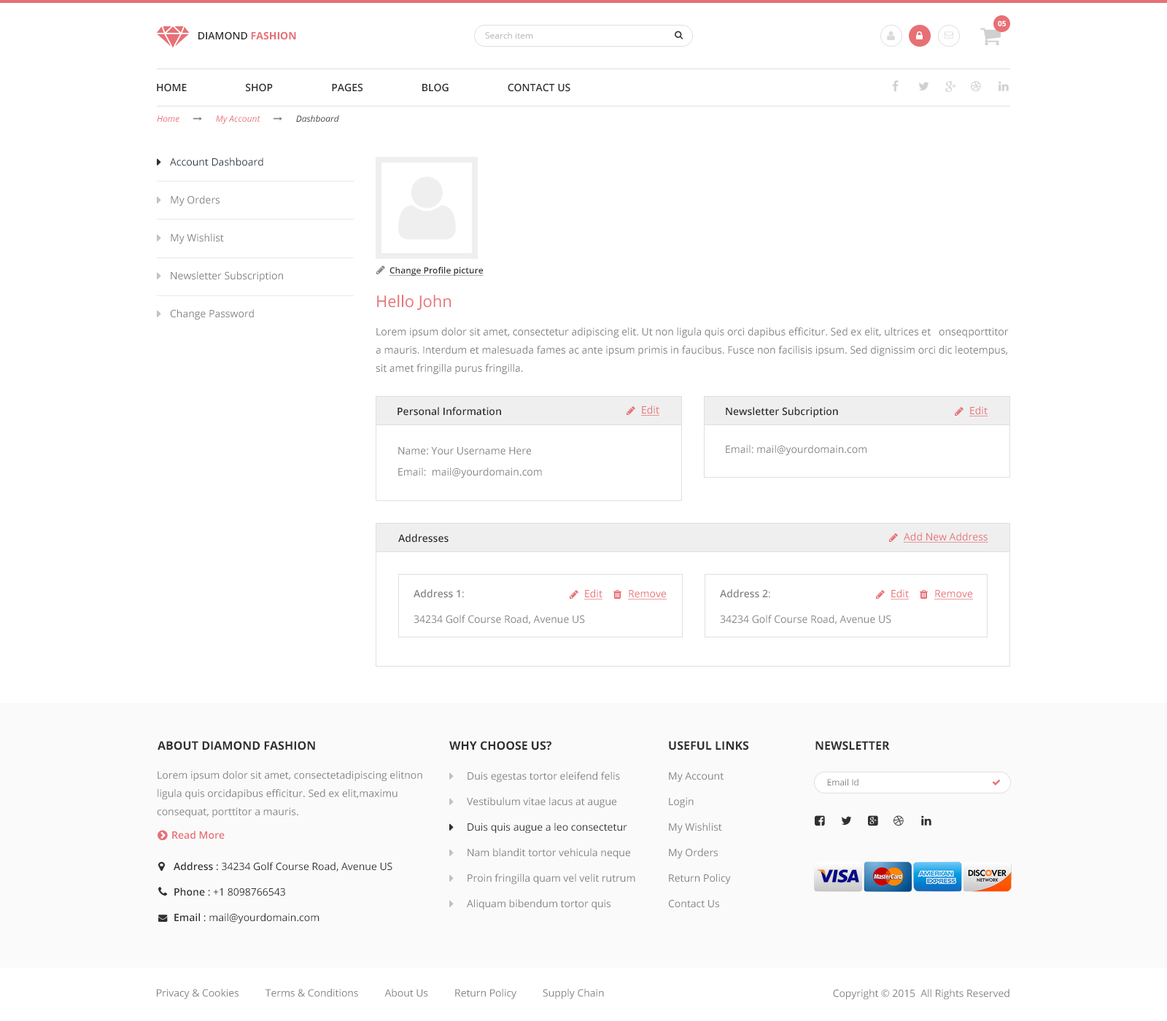
<style>
.page{position:relative;width:1167px;height:1021px;background:#ffffff}
.page>*{position:absolute;margin:0}
.t1{font:7.3px "OpenSans-Bold";color:#ffffff}
.t2{font:10.2px "OpenSans-Semibold";color:#2f2f2f;text-transform:uppercase}
.t3{font:10.2px "OpenSans-Bold";color:#e77075;text-transform:uppercase}
.t4{font:8.8px "OpenSans";color:#c2c2c2}
.t5{font:10.2px/37.9px "OpenSans";color:#848484}
.t6{font:10.2px/37.9px "OpenSans";color:#26394b}
.t7{font:8.8px "OpenSans-Semibold";color:#2f2f2f;text-decoration:underline}
.t8{font:16.1px "OpenSans";color:#e77075}
.t9{font:10.2px/18.2px "OpenSans";color:#848484}
.t10{font:10.2px "OpenSans-Semibold";color:#2f2f2f}
.t11{font:10.2px "OpenSans";color:#e77075;text-decoration:underline}
.t12{font:10.2px/21.2px "OpenSans";color:#848484}
.t13{font:10.2px "OpenSans";color:#848484}
.t14{font:10.2px/25.5px "OpenSans";color:#848484}
.t15{font:10.2px/21.9px "OpenSans-Semibold";color:#848484}
.t16{font:10.2px/21.9px "OpenSans";color:#848484}
.t17{font:11.7px "OpenSans-Bold";color:#2f2f2f;text-transform:uppercase}
.t18{font:10.2px/25.5px "OpenSans";color:#2f2f2f}
.t19{font:8.8px "OpenSans";color:#887f80}
.t20{font:10.2px "OpenSans-Semibold";color:#e77075}
.t21{font:10.2px/25.5px "OpenSans-Semibold";color:#2f2f2f}
</style>
<div class="page">
<p class="t1" style="left:998px;top:20px;width:8px;height:6px">05</p>
<p class="t2" style="left:198px;top:31px;width:98px;height:9px">Diamond <span class="t3">fashion</span></p>
<p class="t4" style="left:485px;top:32px;width:48px;height:7px">Search item</p>
<p class="t2" style="left:157px;top:83px;width:414px;height:9px">Home                      Shop                      pages                      blog                      contact us</p>
<p class="t5" style="left:170px;top:158px;width:113px;height:162px"><span class="t6">Account Dashboard<br></span>My Orders<br>My Wishlist<br>Newsletter Subscription<br>Change Password</p>
<p class="t7" style="left:390px;top:267px;width:94px;height:9px">Change Profile picture</p>
<p class="t8" style="left:377px;top:295px;width:74px;height:15px">Hello John</p>
<p class="t9" style="left:376px;top:328px;width:633px;height:46px">Lorem ipsum dolor sit amet, consectetur adipiscing elit. Ut non ligula quis orci dapibus efficitur. Sed ex elit, ultrices et   onseqporttitor a mauris. Interdum et malesuada fames ac ante ipsum primis in faucibus. Fusce non facilisis ipsum. Sed dignissim orci dic leotempus, sit amet fringilla purus fringilla.</p>
<p class="t10" style="left:398px;top:407px;width:103px;height:9px">Personal Information</p>
<p class="t11" style="left:641px;top:406px;width:19px;height:10px">Edit</p>
<p class="t10" style="left:726px;top:407px;width:112px;height:11px">Newsletter Subcription</p>
<p class="t11" style="left:970px;top:406px;width:18px;height:11px">Edit</p>
<p class="t12" style="left:398px;top:447px;width:144px;height:32px">Name: Your Username Here<br>Email:  mail@yourdomain.com</p>
<p class="t13" style="left:726px;top:445px;width:141px;height:11px">Email: mail@yourdomain.com</p>
<p class="t11" style="left:904px;top:533px;width:85px;height:10px">Add New Address</p>
<p class="t10" style="left:398px;top:534px;width:51px;height:9px">Addresses</p>
<p class="t14" style="left:414px;top:590px;width:171px;height:35px"><span class="t15">Address 1</span><span class="t16">:<br></span>34234 Golf Course Road, Avenue US</p>
<p class="t11" style="left:584px;top:590px;width:19px;height:10px">Edit</p>
<p class="t11" style="left:628px;top:590px;width:39px;height:10px">Remove</p>
<p class="t14" style="left:720px;top:590px;width:172px;height:35px"><span class="t15">Address 2</span><span class="t16">:<br></span>34234 Golf Course Road, Avenue US</p>
<p class="t11" style="left:891px;top:590px;width:18px;height:10px">Edit</p>
<p class="t11" style="left:935px;top:590px;width:38px;height:10px">Remove</p>
<p class="t17" style="left:158px;top:741px;width:157px;height:10px">About diamond Fashion</p>
<p class="t17" style="left:449px;top:741px;width:103px;height:10px">why choose us?</p>
<p class="t17" style="left:669px;top:741px;width:80px;height:10px">useful links</p>
<p class="t17" style="left:816px;top:741px;width:74px;height:10px">newsletter</p>
<p class="t9" style="left:157px;top:771px;width:265px;height:47px">Lorem ipsum dolor sit amet, consectetadipiscing elitnon ligula quis orcidapibus efficitur. Sed ex elit,maximu<br>consequat, porttitor a mauris.</p>
<p class="t14" style="left:467px;top:772px;width:168px;height:139px">Duis egestas tortor eleifend felis <br>Vestibulum vitae lacus at augue <br><span class="t18">Duis quis augue a leo consectetur <br></span>Nam blandit tortor vehicula neque<br>Proin fringilla quam vel velit rutrum<br>Aliquam bibendum tortor quis</p>
<p class="t14" style="left:668px;top:773px;width:63px;height:135px">My Account<br>Login<br>My Wishlist<br>My Orders<br>Return Policy<br>Contact Us</p>
<p class="t19" style="left:827px;top:779px;width:32px;height:7px">Email Id</p>
<p class="t20" style="left:172px;top:831px;width:53px;height:9px">Read More</p>
<p class="t18" style="left:174px;top:862px;width:219px;height:62px"><span class="t21">Address</span> : 34234 Golf Course Road, Avenue US<br><span class="t21">Phone</span> : +1 8098766543<br><span class="t21">Email</span> : mail@yourdomain.com</p>
<p class="t13" style="left:157px;top:989px;width:447px;height:11px">Privacy &amp; Cookies          Terms &amp; Conditions          About Us          Return Policy          Supply Chain</p>
<p class="t13" style="left:833px;top:989px;width:177px;height:11px">Copyright © 2015  All Rights Reserved</p>
</div>
